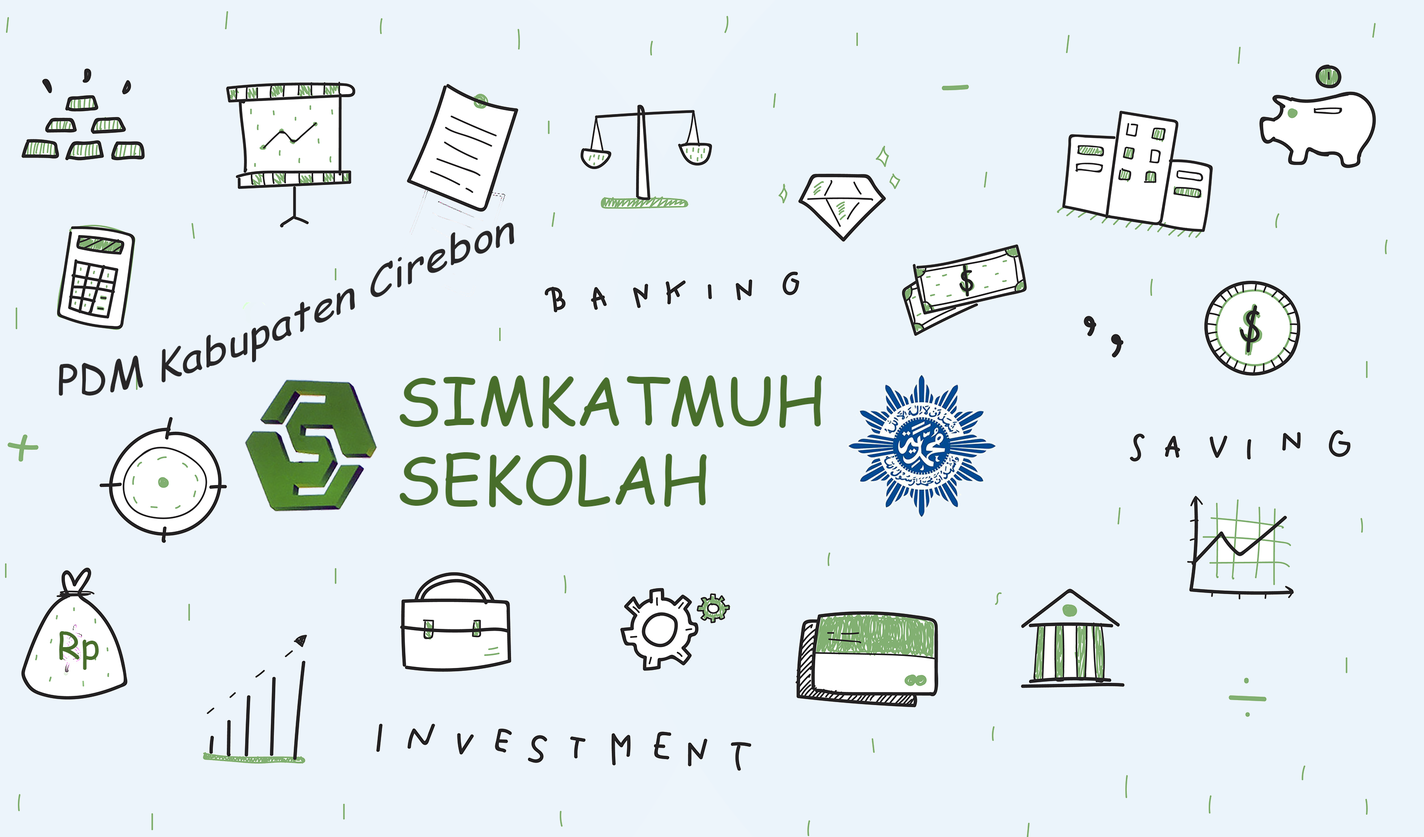
<style>
.page{position:relative;width:1424px;height:837px;background:#ebf4fb}
.page>*{position:absolute;margin:0}
.t1{font:41.3px "ComicSansMS";color:#282627}
.t2{font:65.7px "ComicSansMS";color:#486e2b}
.t3{font:37.2px "ComicSansMS";color:#486e2b}
</style>
<div class="page">
<p class="t1" style="left:59px;top:223px;width:455px;height:173px">PDM Kabupaten Cirebon</p>
<p class="t2" style="left:399px;top:375px;width:423px;height:133px">SIMKATMUH<br>SEKOLAH</p>
<p class="t3" style="left:59px;top:632px;width:40px;height:38px">Rp</p>
</div>
